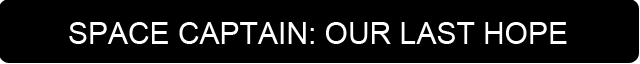
<style>
.page{position:relative;width:640px;height:64px;background:#000000}
.page>*{position:absolute;margin:0}
.t1{font:30px "ArialMT";color:#ffffff;text-transform:uppercase}
</style>
<div class="page">
<p class="t1" style="left:69px;top:22px;width:498px;height:22px">Space Captain: Our Last Hope</p>
</div>
